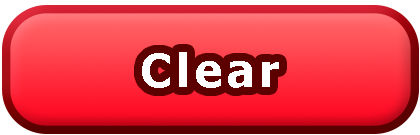
<style>
.page{position:relative;width:420px;height:135px}
.page>*{position:absolute;margin:0}
.t1{font:46.3px "Tahoma-Bold";letter-spacing:0.1em;color:#ffffff}
</style>
<div class="page">
<p class="t1" style="left:142px;top:52px;width:137px;height:36px">Clear</p>
</div>
